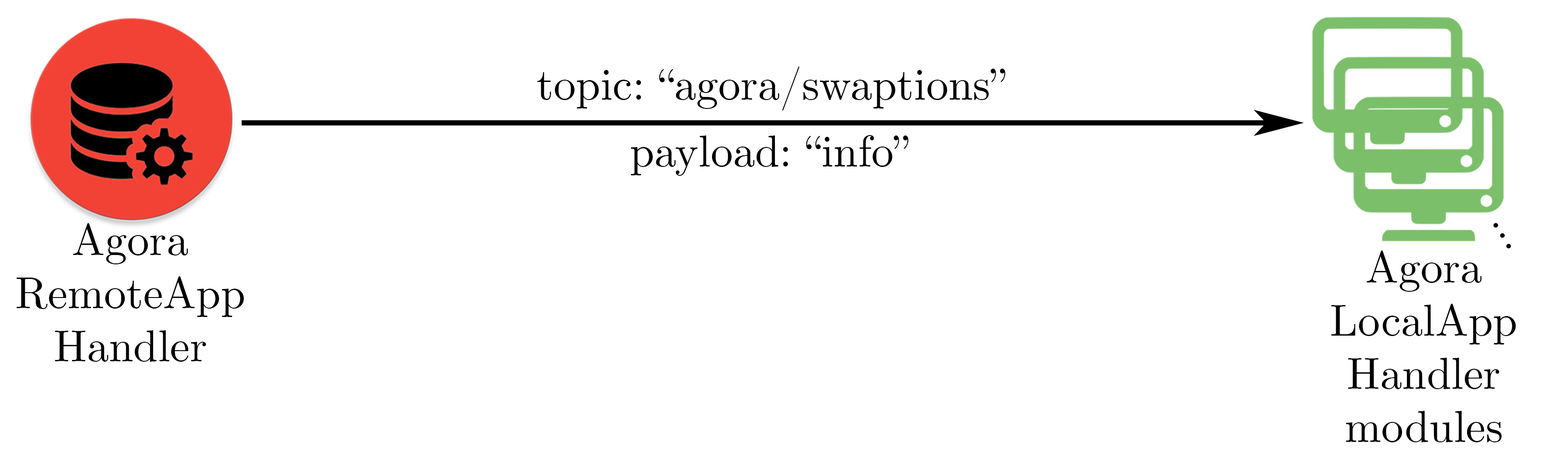
<style>
.page{position:relative;width:1568px;height:460px;background:#ffffff}
.page>*{position:absolute;margin:0}
.t1{font:44.3px "CMUSerif-Roman";color:#000000}
</style>
<div class="page">
<p class="t1" style="left:537px;top:66px;width:469px;height:45px">topic: “agora/swaptions”</p>
<p class="t1" style="left:631px;top:135px;width:278px;height:41px">payload: “info”</p>
<p class="t1" style="left:16px;top:223px;width:228px;height:139px;text-align:center">Agora<br>RemoteApp<br>Handler</p>
<p class="t1" style="left:1493px;top:223px;width:18px;height:25px;rotate:58deg">...</p>
<p class="t1" style="left:1331px;top:250px;width:185px;height:192px;text-align:center">Agora<br>LocalApp<br>Handler<br>modules</p>
</div>
